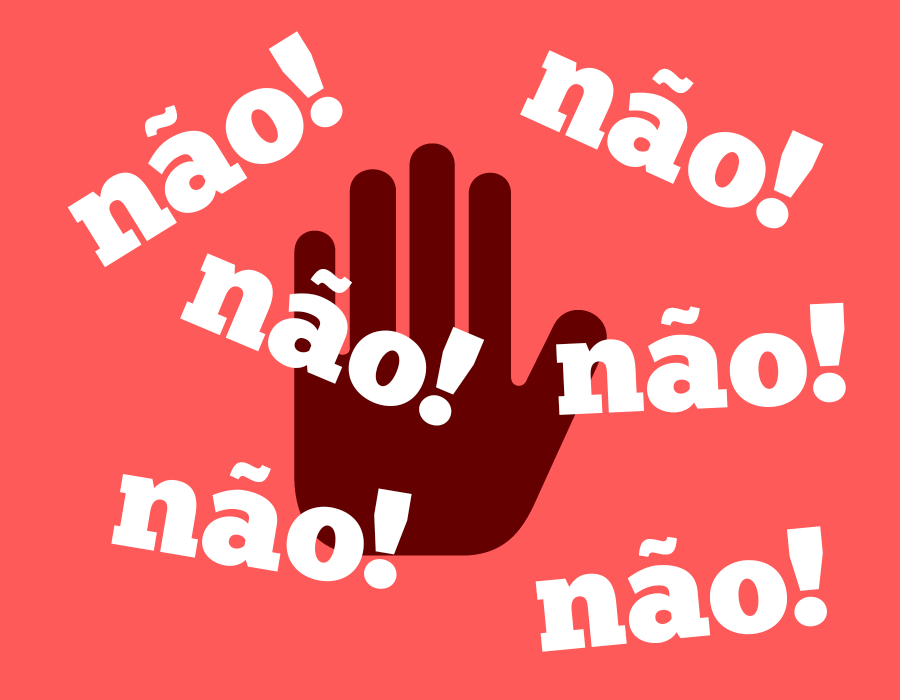
<style>
.page{position:relative;width:900px;height:700px;background:#ff5a5a}
.page>*{position:absolute;margin:0}
.t1{font:141px "ChunkFive-Roman";color:#ffffff}
.t2{font:92.7px "GothamUltra";color:#ffffff}
</style>
<div class="page">
<p class="t1" style="left:67px;top:31px;width:276px;height:237px;rotate:-32deg">nao!</p>
<p class="t1" style="left:520px;top:50px;width:304px;height:179px;rotate:25deg">nao!</p>
<p class="t2" style="left:652px;top:68px;width:42px;height:26px;rotate:25deg">~</p>
<p class="t2" style="left:145px;top:105px;width:32px;height:33px;rotate:-32deg">~</p>
<p class="t1" style="left:180px;top:253px;width:305px;height:173px;rotate:23deg">nao!</p>
<p class="t2" style="left:310px;top:269px;width:42px;height:24px;rotate:23deg">~</p>
<p class="t1" style="left:556px;top:302px;width:290px;height:113px;rotate:-3deg">nao!</p>
<p class="t2" style="left:661px;top:306px;width:39px;height:20px;rotate:-3deg">~</p>
<p class="t2" style="left:229px;top:462px;width:42px;height:20px;rotate:10deg">~</p>
<p class="t1" style="left:111px;top:474px;width:301px;height:115px;rotate:10deg">nao!</p>
<p class="t1" style="left:535px;top:526px;width:292px;height:126px;rotate:-5deg">nao!</p>
<p class="t2" style="left:639px;top:536px;width:38px;height:21px;rotate:-5deg">~</p>
</div>
